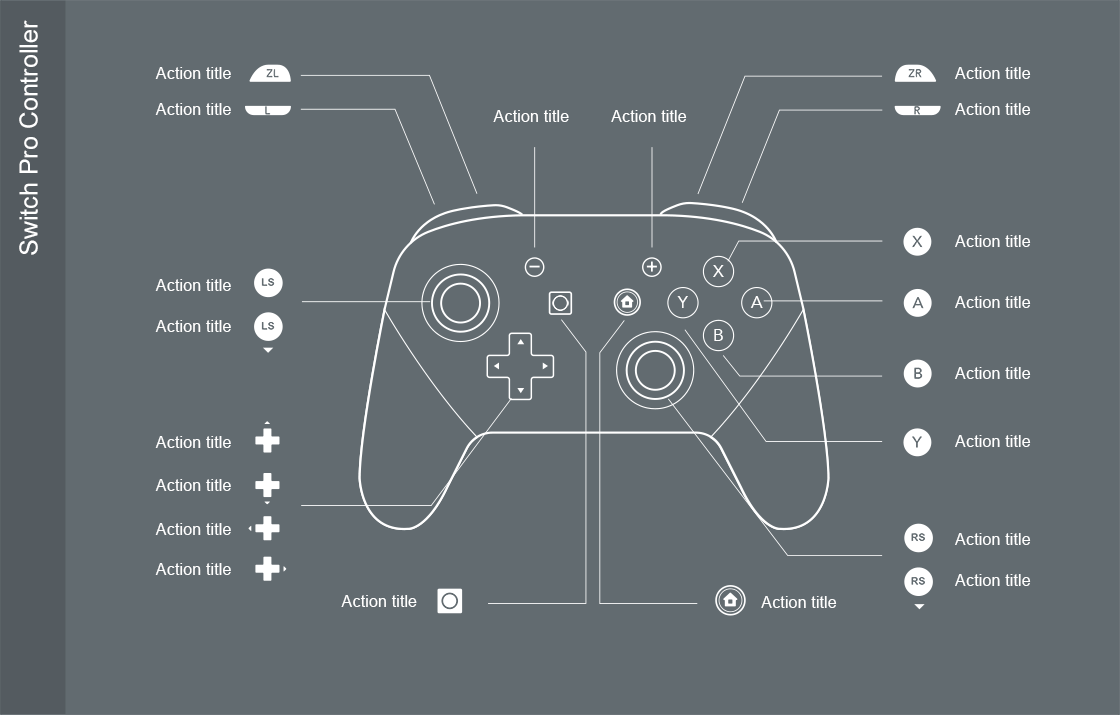
<style>
.page{position:relative;width:1120px;height:715px;background:#626b70}
.page>*{position:absolute;margin:0}
.t1{font:25px "ArialMT";color:#ffffff}
.t2{font:16.4px "ArialMT";color:#ffffff}
.t3{font:16.7px "Avenir-Roman";color:#ffffff}
</style>
<div class="page">
<p class="t1" style="left:19px;top:20px;width:19px;height:235px;rotate:-90deg">Switch Pro Controller</p>
<p class="t2" style="left:155px;top:67px;width:76px;height:12px">Action title</p>
<p class="t2" style="left:955px;top:67px;width:76px;height:12px">Action title</p>
<p class="t2" style="left:155px;top:103px;width:76px;height:12px">Action title</p>
<p class="t2" style="left:493px;top:110px;width:76px;height:12px">Action title</p>
<p class="t2" style="left:611px;top:110px;width:76px;height:12px">Action title</p>
<p class="t2" style="left:955px;top:103px;width:76px;height:12px">Action title</p>
<p class="t2" style="left:955px;top:235px;width:76px;height:12px">Action title</p>
<p class="t3" style="left:713px;top:265px;width:11px;height:12px">X</p>
<p class="t2" style="left:155px;top:279px;width:76px;height:12px">Action title</p>
<p class="t3" style="left:677px;top:296px;width:11px;height:12px">Y</p>
<p class="t3" style="left:750px;top:296px;width:13px;height:12px">A</p>
<p class="t2" style="left:955px;top:296px;width:76px;height:12px">Action title</p>
<p class="t2" style="left:155px;top:320px;width:76px;height:12px">Action title</p>
<p class="t3" style="left:714px;top:329px;width:9px;height:12px">B</p>
<p class="t2" style="left:955px;top:367px;width:76px;height:12px">Action title</p>
<p class="t2" style="left:155px;top:436px;width:76px;height:12px">Action title</p>
<p class="t2" style="left:955px;top:435px;width:76px;height:12px">Action title</p>
<p class="t2" style="left:155px;top:479px;width:76px;height:12px">Action title</p>
<p class="t2" style="left:155px;top:523px;width:76px;height:12px">Action title</p>
<p class="t2" style="left:955px;top:533px;width:76px;height:12px">Action title</p>
<p class="t2" style="left:155px;top:563px;width:76px;height:12px">Action title</p>
<p class="t2" style="left:955px;top:574px;width:76px;height:12px">Action title</p>
<p class="t2" style="left:341px;top:595px;width:76px;height:12px">Action title</p>
<p class="t2" style="left:761px;top:596px;width:76px;height:12px">Action title</p>
</div>
